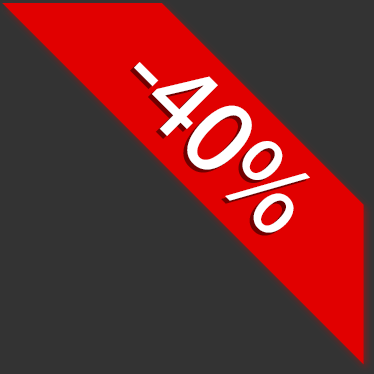
<style>
.page{position:relative;width:374px;height:374px;background:#333333}
.page>*{position:absolute;margin:0}
.t1{font:95.5px "AdobeHeitiStd-Regular";color:#ffffff}
</style>
<div class="page">
<p class="t1" style="left:134px;top:62px;width:176px;height:171px;rotate:45deg">-40%</p>
</div>
